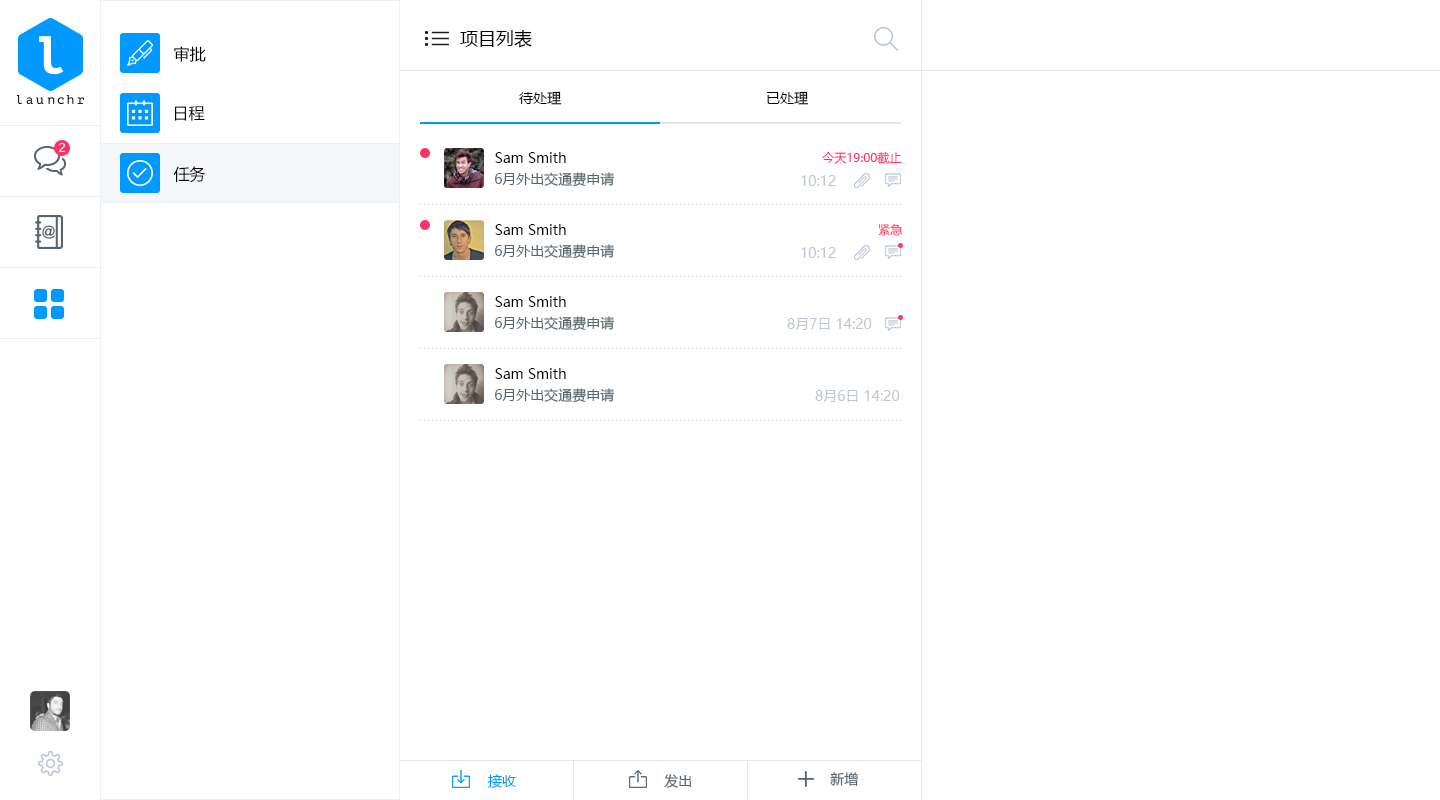
<style>
.page{position:relative;width:1440px;height:800px;background:#ffffff}
.page>*{position:absolute;margin:0}
.t1{font:18px "MicrosoftYaHei";color:#000000}
.t2{font:16px "MicrosoftYaHei";color:#000000}
.t3{font:14px "MicrosoftYaHei";color:#000000}
.t4{font:12px "MicrosoftYaHei";letter-spacing:0.1em;color:#ffffff}
.t5{font:12px "MicrosoftYaHei";color:#ff3366}
.t6{font:14px "MicrosoftYaHei";color:#56646d}
.t7{font:14px "MicrosoftYaHei";color:#bec6d3}
.t8{font:14px "MicrosoftYaHei";color:#0099ff}
</style>
<div class="page">
<p class="t1" style="left:460px;top:30px;width:72px;height:18px">项目列表</p>
<p class="t2" style="left:174px;top:46px;width:32px;height:16px">审批</p>
<p class="t3" style="left:519px;top:91px;width:43px;height:14px">待处理</p>
<p class="t3" style="left:767px;top:91px;width:42px;height:14px">已处理</p>
<p class="t2" style="left:175px;top:106px;width:30px;height:15px">日程</p>
<p class="t4" style="left:59px;top:143px;width:6px;height:9px">2</p>
<p class="t3" style="left:495px;top:152px;width:71px;height:11px">Sam Smith</p>
<p class="t5" style="left:822px;top:151px;width:80px;height:13px">今天19:00截止</p>
<p class="t2" style="left:173px;top:166px;width:33px;height:17px">任务</p>
<p class="t6" style="left:495px;top:172px;width:120px;height:15px">6月外出交通费申请</p>
<p class="t7" style="left:801px;top:175px;width:35px;height:11px">10:12</p>
<p class="t3" style="left:495px;top:224px;width:71px;height:11px">Sam Smith</p>
<p class="t5" style="left:878px;top:223px;width:25px;height:13px">紧急</p>
<p class="t6" style="left:495px;top:244px;width:120px;height:15px">6月外出交通费申请</p>
<p class="t7" style="left:801px;top:247px;width:35px;height:11px">10:12</p>
<p class="t3" style="left:495px;top:296px;width:71px;height:11px">Sam Smith</p>
<p class="t6" style="left:495px;top:316px;width:120px;height:15px">6月外出交通费申请</p>
<p class="t7" style="left:787px;top:318px;width:85px;height:12px">8月7日 14:20</p>
<p class="t3" style="left:495px;top:368px;width:71px;height:11px">Sam Smith</p>
<p class="t6" style="left:495px;top:388px;width:120px;height:15px">6月外出交通费申请</p>
<p class="t7" style="left:815px;top:390px;width:85px;height:12px">8月6日 14:20</p>
<p class="t8" style="left:487px;top:774px;width:29px;height:14px">接收</p>
<p class="t6" style="left:664px;top:774px;width:27px;height:14px">发出</p>
<p class="t6" style="left:830px;top:772px;width:28px;height:14px">新增</p>
</div>
